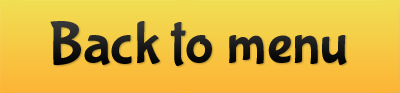
<style>
.page{position:relative;width:400px;height:93px}
.page>*{position:absolute;margin:0}
.t1{font:60px "BubblegumSans-Regular";color:#171717}
</style>
<div class="page">
<p class="t1" style="left:50px;top:21px;width:297px;height:45px">Back to menu</p>
</div>
